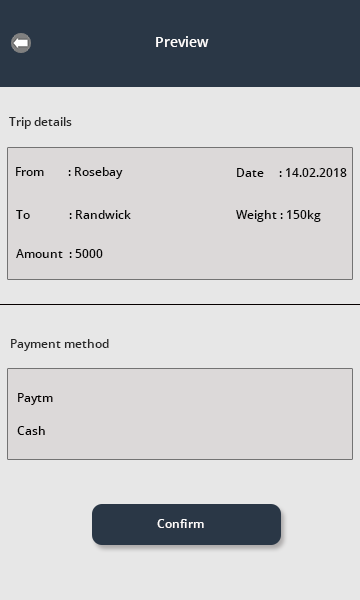
<style>
.page{position:relative;width:360px;height:600px;background:#e7e7e7}
.page>*{position:absolute;margin:0}
.t1{font:14px "OpenSans-Semibold";color:#fffdfd}
.t2{font:12px "OpenSans-Semibold";color:#282828}
.t3{font:12px "OpenSans-Semibold";color:#060606}
.t4{font:12px "OpenSans-Semibold";color:#050202}
.t5{font:12px "OpenSans-Semibold";color:#020101}
.t6{font:12px "OpenSans-Semibold";color:#fefcfc}
</style>
<div class="page">
<p class="t1" style="left:156px;top:36px;width:53px;height:11px">Preview</p>
<p class="t2" style="left:9px;top:117px;width:63px;height:12px">Trip details</p>
<p class="t3" style="left:16px;top:167px;width:107px;height:12px">From        : Rosebay</p>
<p class="t3" style="left:237px;top:168px;width:110px;height:9px">Date     : 14.02.2018</p>
<p class="t3" style="left:16px;top:210px;width:115px;height:9px">To             : Randwick</p>
<p class="t3" style="left:236px;top:210px;width:85px;height:12px">Weight : 150kg</p>
<p class="t3" style="left:16px;top:249px;width:87px;height:9px">Amount  : 5000</p>
<p class="t2" style="left:11px;top:339px;width:98px;height:12px">Payment method</p>
<p class="t4" style="left:18px;top:393px;width:35px;height:12px">Paytm</p>
<p class="t5" style="left:17px;top:426px;width:28px;height:9px">Cash</p>
<p class="t6" style="left:157px;top:519px;width:47px;height:9px">Confirm</p>
</div>
